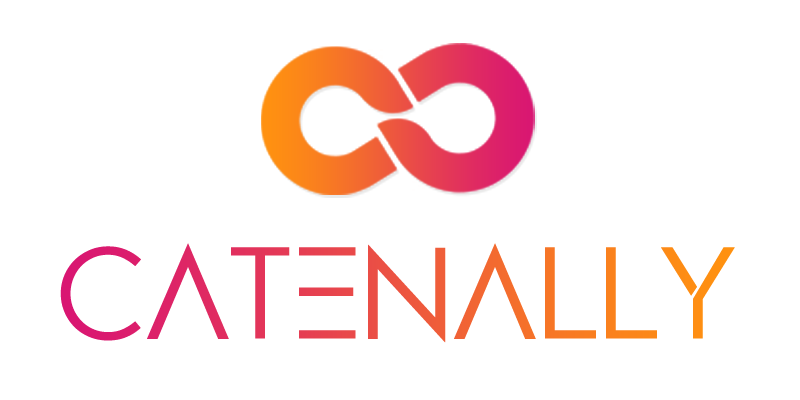
<style>
.page{position:relative;width:800px;height:400px;background:#ffffff}
.page>*{position:absolute;margin:0}
.t1{font:125px "Pasajero";letter-spacing:0.025em}
</style>
<div class="page">
<p class="t1" style="left:60px;top:243px;width:675px;height:100px">CAtEnALLY</p>
</div>
